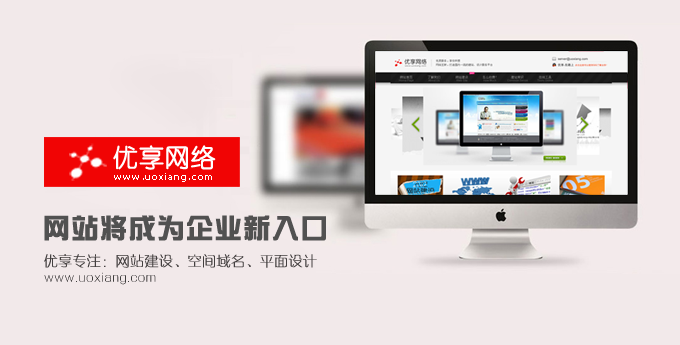
<style>
.page{position:relative;width:680px;height:345px;background:#f2e9ea}
.page>*{position:absolute;margin:0}
.t1{font:25.1px "YouYuan";color:#ffffff;font-weight:bold}
.t2{font:10.5px "Tahoma";letter-spacing:0.068em;color:#ffffff}
.t3{font:26px "By-JOSSQ-DMF-in-BeiJing";letter-spacing:0.1em;color:#515151}
.t4{font:14px "FZXQJW--GB1-0";color:#433f3f;font-weight:bold}
.t5{font:12px "FZXQJW--GB1-0";letter-spacing:0.08em}
</style>
<div class="page">
<p class="t1" style="left:113px;top:145px;width:103px;height:25px">优享网络</p>
<p class="t2" style="left:114px;top:173px;width:98px;height:9px">www.uoxiang.com</p>
<p class="t3" style="left:44px;top:215px;width:282px;height:26px">网站将成为企业新入口</p>
<p class="t4" style="left:44px;top:254px;width:273px;height:14px">优享专注：网站建设、空间域名、平面设计</p>
<p class="t5" style="left:44px;top:272px;width:112px;height:13px">www.uoxiang.com</p>
</div>
